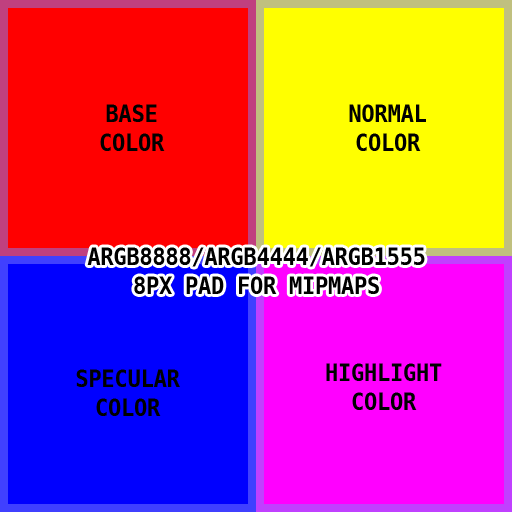
<style>
.page{position:relative;width:512px;height:512px;background:#ff0000}
.page>*{position:absolute;margin:0}
.t1{font:24px "MesloLGLNerdFo-Bold";color:#000000;text-transform:uppercase;scale:0.9 1}
</style>
<div class="page">
<p class="t1" style="left:100px;top:104px;width:65px;height:47px;text-align:center">BASE<br>COLOR</p>
<p class="t1" style="left:349px;top:104px;width:77px;height:47px;text-align:center">NORMAL<br>COLOR</p>
<p class="t1" style="left:87px;top:247px;width:338px;height:47px;text-align:center">ARGB8888/ARGB4444/ARGB1555<br>8px PAD FOR MIPMAPS</p>
<p class="t1" style="left:326px;top:363px;width:116px;height:47px;text-align:center">HIGHLIGHT<br>COLOR</p>
<p class="t1" style="left:76px;top:369px;width:104px;height:47px;text-align:center">SPECULAR<br>COLOR</p>
</div>
